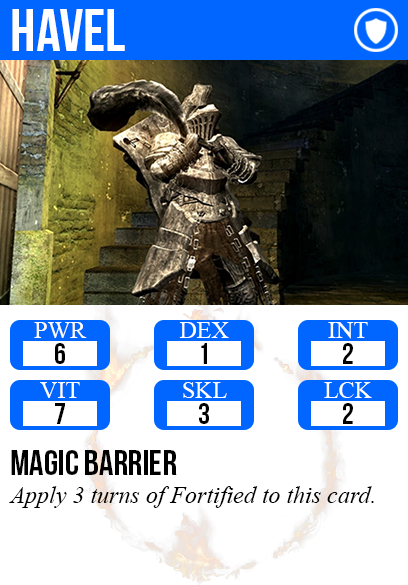
<style>
.page{position:relative;width:408px;height:585px;background:#ffffff}
.page>*{position:absolute;margin:0}
.t1{font:60px "BebasNeue";color:#ffffff}
.t2{font:24px "TimesNewRomanPSMT";color:#ffffff}
.t3{font:30px "BebasNeue";color:#000000}
.t4{font:36px "BebasNeue";color:#000000}
.t5{font:24px "TimesNewRomanPS-ItalicMT";color:#000000}
</style>
<div class="page">
<p class="t1" style="left:12px;top:9px;width:113px;height:42px">havel</p>
<p class="t2" style="left:34px;top:322px;width:53px;height:16px">PWR</p>
<p class="t2" style="left:179px;top:322px;width:50px;height:16px">DEX</p>
<p class="t2" style="left:328px;top:322px;width:40px;height:17px">INT</p>
<p class="t3" style="left:55px;top:343px;width:10px;height:21px">6</p>
<p class="t3" style="left:201px;top:343px;width:6px;height:21px">1</p>
<p class="t3" style="left:343px;top:343px;width:10px;height:21px">2</p>
<p class="t2" style="left:40px;top:382px;width:40px;height:16px">VIT</p>
<p class="t2" style="left:183px;top:382px;width:44px;height:16px">SKL</p>
<p class="t2" style="left:324px;top:382px;width:48px;height:16px">LCK</p>
<p class="t3" style="left:55px;top:403px;width:10px;height:21px">7</p>
<p class="t3" style="left:199px;top:403px;width:10px;height:21px">3</p>
<p class="t3" style="left:343px;top:403px;width:10px;height:21px">2</p>
<p class="t4" style="left:11px;top:450px;width:166px;height:25px">magic barrier</p>
<p class="t5" style="left:9px;top:486px;width:365px;height:22px">Apply 3 turns of Fortified to this card.</p>
</div>
